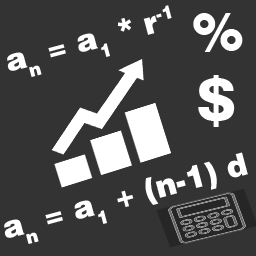
<style>
.page{position:relative;width:256px;height:256px;background:#333333}
.page>*{position:absolute;margin:0}
.t1{font:31.1px "HelveticaBlack";letter-spacing:-0.005em;color:#ffffff}
.t2{font:49.8px "HelveticaBlack";letter-spacing:-0.005em;color:#ffffff}
.t3{font:58.4px "HelveticaBlack";letter-spacing:-0.005em;color:#ffffff}
</style>
<div class="page">
<p class="t1" style="left:7px;top:5px;width:165px;height:72px;rotate:-15deg">an = a1 * r-1</p>
<p class="t2" style="left:193px;top:13px;width:50px;height:39px">%</p>
<p class="t3" style="left:198px;top:75px;width:37px;height:52px">$</p>
<p class="t1" style="left:4px;top:152px;width:244px;height:92px;rotate:-15deg">an = a1 + (n-1) d</p>
</div>
